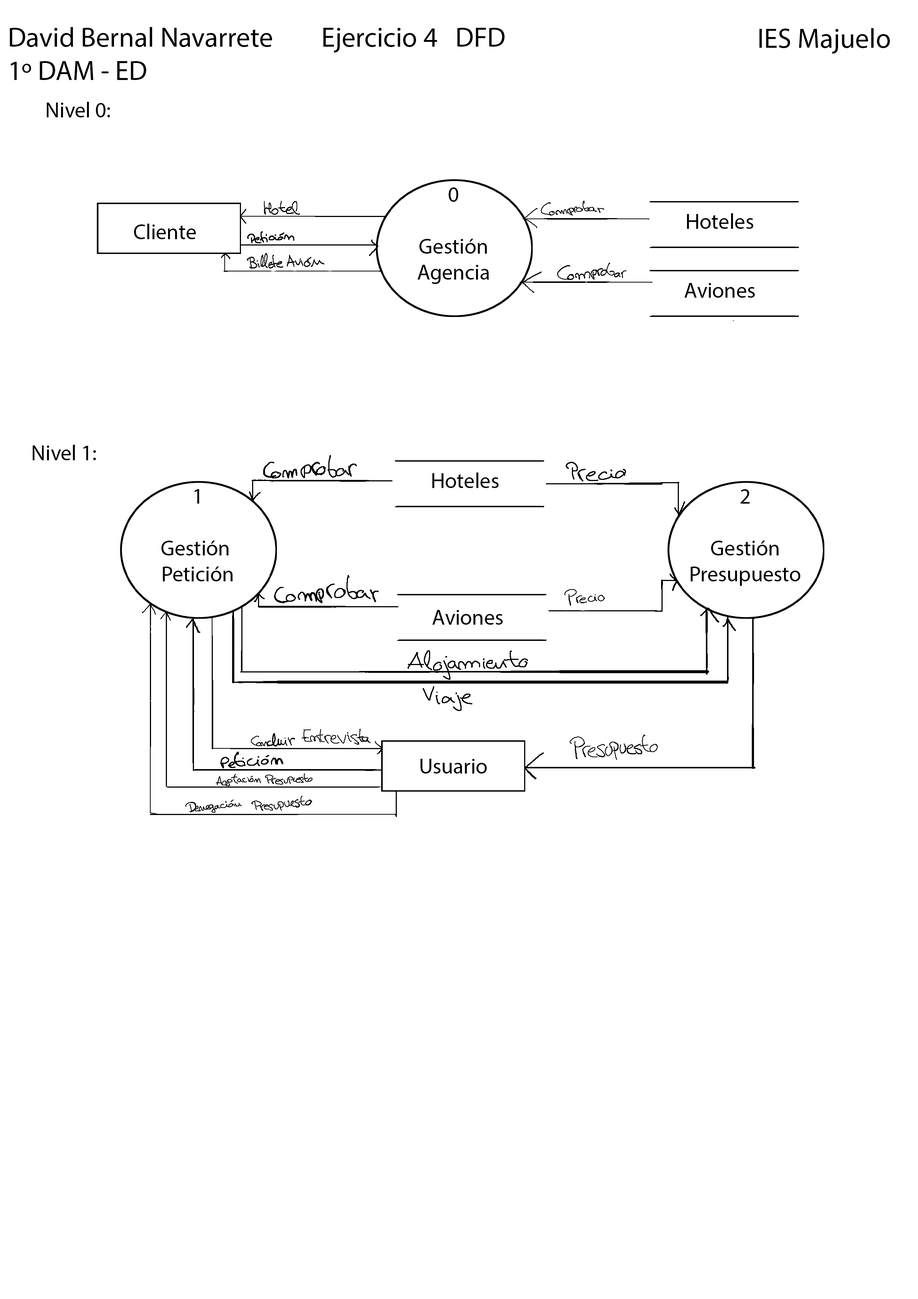
<style>
.page{position:relative;width:918px;height:1299px;background:#ffffff}
.page>*{position:absolute;margin:0}
.t1{font:27.8px "MyriadPro-Regular";color:#000000}
.t2{font:21.6px "MyriadPro-Regular";color:#000000}
</style>
<div class="page">
<p class="t1" style="left:10px;top:27px;width:495px;height:53px">David Bernal Navarrete         Ejercicio 4   DFD<br>1º DAM - ED</p>
<p class="t1" style="left:759px;top:28px;width:131px;height:26px">IES Majuelo</p>
<p class="t2" style="left:47px;top:102px;width:63px;height:15px">Nivel 0:</p>
<p class="t2" style="left:418px;top:187px;width:71px;height:97px;text-align:center">0<br><br>Gestión<br>Agencia</p>
<p class="t2" style="left:687px;top:213px;width:66px;height:16px">Hoteles</p>
<p class="t2" style="left:134px;top:224px;width:62px;height:15px">Cliente</p>
<p class="t2" style="left:685px;top:283px;width:70px;height:15px">Aviones</p>
<p class="t2" style="left:33px;top:445px;width:63px;height:15px">Nivel 1:</p>
<p class="t2" style="left:432px;top:472px;width:67px;height:16px">Hoteles</p>
<p class="t2" style="left:161px;top:489px;width:72px;height:92px;text-align:center">1<br><br>Gestión <br>Petición</p>
<p class="t2" style="left:691px;top:489px;width:109px;height:97px;text-align:center">2<br><br>Gestión<br>Presupuesto</p>
<p class="t2" style="left:432px;top:610px;width:71px;height:15px">Aviones</p>
<p class="t2" style="left:421px;top:759px;width:66px;height:14px">Usuario</p>
</div>
